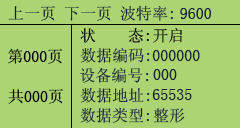
<style>
.page{position:relative;width:240px;height:128px;background:#acd473}
.page>*{position:absolute;margin:0}
.t1{font:16px "SimSun";color:#132232}
.t2{font:16px "SimSun";color:#000000}
.t3{font:16px "SimSun"}
</style>
<div class="page">
<p class="t1" style="left:8px;top:6px;width:47px;height:15px">上一页</p>
<p class="t1" style="left:65px;top:6px;width:46px;height:15px">下一页</p>
<p class="t1" style="left:120px;top:5px;width:53px;height:16px">波特率:</p>
<p class="t1" style="left:180px;top:8px;width:31px;height:11px">9600</p>
<p class="t2" style="left:80px;top:27px;width:69px;height:16px">状    态:</p>
<p class="t3" style="left:153px;top:27px;width:29px;height:16px">开启</p>
<p class="t2" style="left:8px;top:48px;width:54px;height:16px">第000页</p>
<p class="t1" style="left:81px;top:47px;width:69px;height:16px">数据编码:</p>
<p class="t1" style="left:152px;top:50px;width:48px;height:11px">000000</p>
<p class="t1" style="left:80px;top:67px;width:69px;height:16px">设备编号:</p>
<p class="t1" style="left:153px;top:69px;width:24px;height:11px">000</p>
<p class="t2" style="left:8px;top:89px;width:55px;height:15px">共000页</p>
<p class="t1" style="left:81px;top:88px;width:69px;height:15px">数据地址:</p>
<p class="t1" style="left:152px;top:89px;width:40px;height:11px">65535</p>
<p class="t1" style="left:80px;top:107px;width:69px;height:16px">数据类型:</p>
<p class="t1" style="left:153px;top:108px;width:32px;height:15px">整形</p>
</div>
